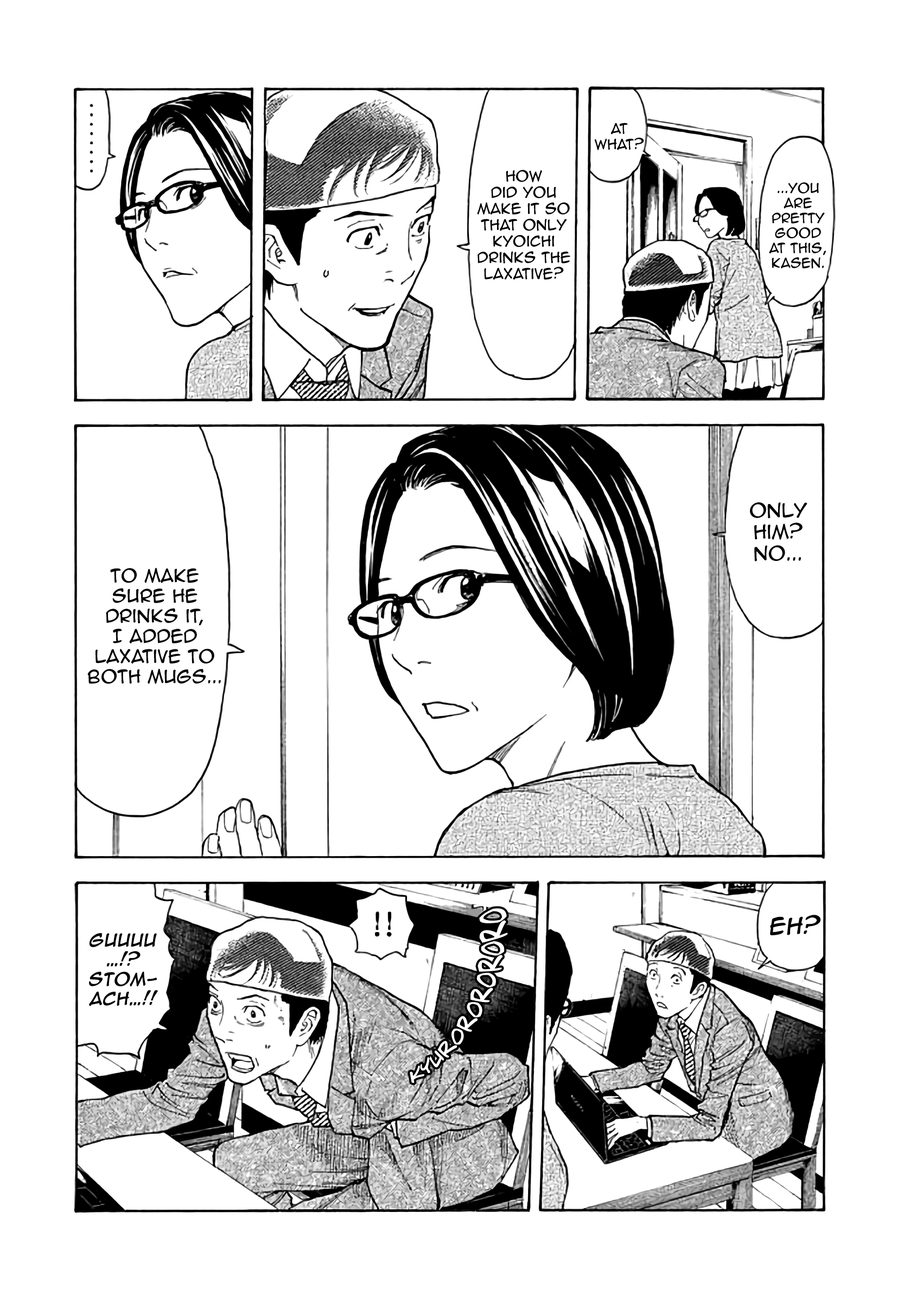
<style>
.page{position:relative;width:916px;height:1302px;background:#ffffff}
.page>*{position:absolute;margin:0}
.t1{font:13px "AnimeAce2.0BB";color:#000000}
.t2{font:13.6px "AnimeAce2.0BB";color:#000000}
.t3{font:12.5px "AnimeAce2.0BB";color:#000000}
.t4{font:17.9px "AnimeAce2.0BB";color:#000000}
.t5{font:16.8px "AnimeAce2.0BB";color:#000000}
.t6{font:20.6px "AdamWarrenpro";color:#ffffff}
.t7{font:21.2px "AnimeAce2.0BB";color:#000000;font-weight:bold;font-style:italic}
.t8{font:16.3px "AnimeAce2.0BB";color:#000000;font-weight:bold;font-style:italic}
</style>
<div class="page">
<p class="t1" style="left:594px;top:123px;width:50px;height:27px;text-align:center">at What?</p>
<p class="t2" style="left:477px;top:170px;width:93px;height:110px;text-align:center">How <br>did you <br>make it so <br>that only <br>Kyoichi <br>drinks the <br>laxative?</p>
<p class="t3" style="left:769px;top:182px;width:57px;height:87px;text-align:center">...you are pretty good <br>at this, Kasen.</p>
<p class="t4" style="left:750px;top:502px;width:57px;height:60px;text-align:center">Only him? No...</p>
<p class="t5" style="left:87px;top:567px;width:134px;height:117px;text-align:center">to make <br>sure he drinks it, <br>I added <br>laxative to both mugs...</p>
<p class="t6" style="left:410px;top:908px;width:98px;height:175px;rotate:-62deg">kyurororororo</p>
<p class="t7" style="left:770px;top:915px;width:50px;height:20px">Eh?</p>
<p class="t8" style="left:89px;top:933px;width:69px;height:73px;text-align:center">Guuuu<br>…!? Stomach…!!</p>
</div>
